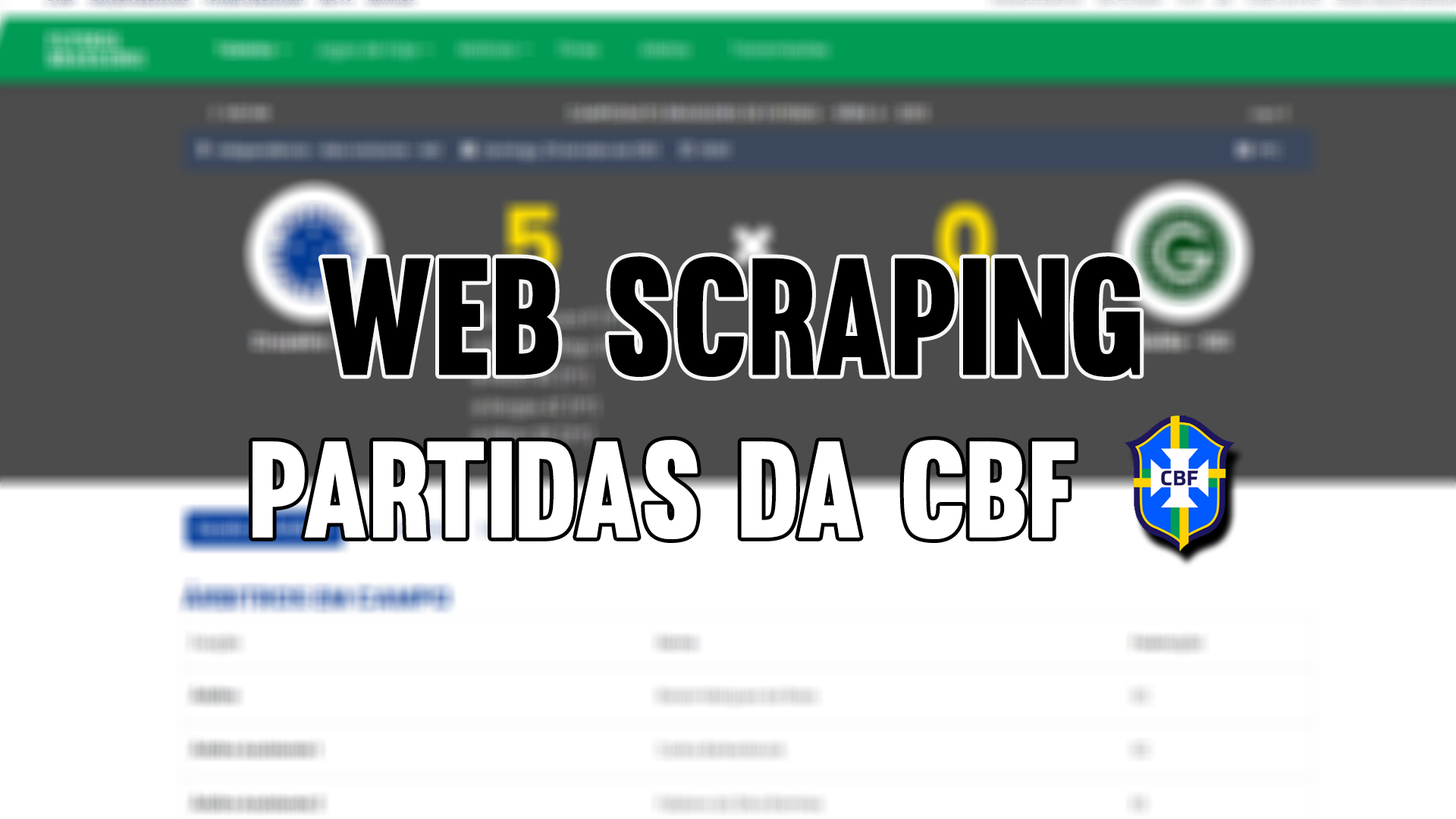
<style>
.page{position:relative;width:1456px;height:819px;background:#ffffff}
.page>*{position:absolute;margin:0}
.t1{font:163.2px "Muro-Regular";color:#000000;scale:0.89 1}
.t2{font:134.2px "Muro-Regular";color:#ffffff;scale:0.95 1}
</style>
<div class="page">
<p class="t1" style="left:322px;top:256px;width:819px;height:121px">WEB SCRAPING</p>
<p class="t2" style="left:253px;top:440px;width:822px;height:99px">PARTIDAS DA CBF</p>
</div>
